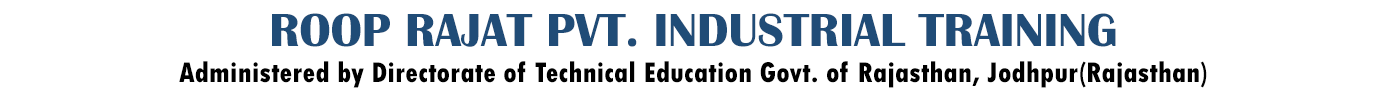
<style>
.page{position:relative;width:1400px;height:110px;background:#ffffff}
.page>*{position:absolute;margin:0}
.t1{font:30px "TwCenMT-CondensedExtraBold";color:#000000}
.t2{font:48px "BritannicBold";color:#204c77}
.t3{font:60px "TwCenMT-CondensedExtraBold";color:#000000}
</style>
<div class="page">
<p class="t1" style="left:179px;top:13px;width:1028px;height:75px;text-align:center"><span class="t2">ROOP RAJAT PVT. INDUSTRIAL TRAINING <br></span>Administered by Directorate of Technical Education Govt. of Rajasthan, Jodhpur(Rajasthan) <br><span class="t3">INSTITUTE</span></p>
</div>
